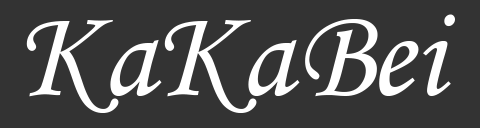
<style>
.page{position:relative;width:480px;height:128px;background:#333333}
.page>*{position:absolute;margin:0}
.t1{font:128px "STLiti";color:#ffffff}
</style>
<div class="page">
<p class="t1" style="left:26px;top:14px;width:429px;height:99px">KaKaBei</p>
</div>
